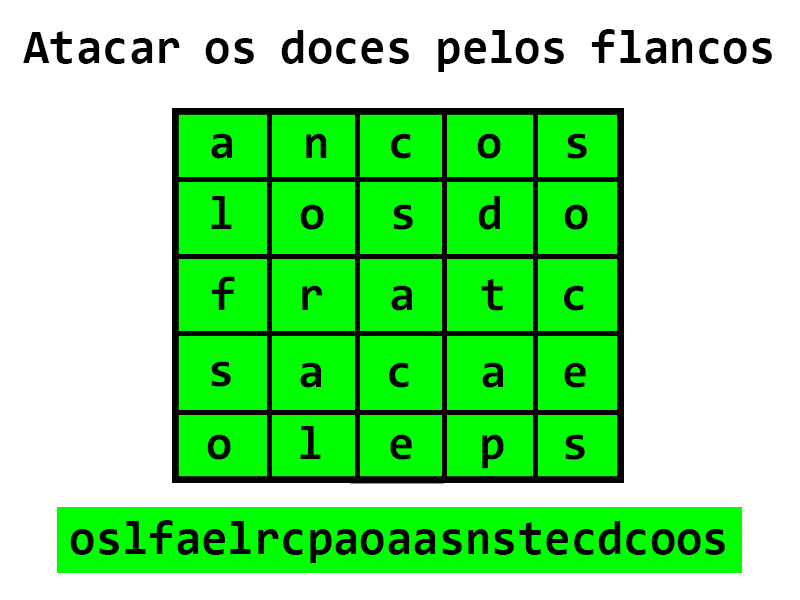
<style>
.page{position:relative;width:800px;height:600px;background:#ffffff}
.page>*{position:absolute;margin:0}
.t1{font:48px "Consolas-Bold";color:#000000}
.t2{font:48.1px "Consolas-Bold";color:#000000}
</style>
<div class="page">
<p class="t1" style="left:23px;top:29px;width:749px;height:43px">Atacar os doces pelos flancos</p>
<p class="t2" style="left:211px;top:133px;width:21px;height:26px">a</p>
<p class="t2" style="left:306px;top:133px;width:21px;height:25px">n</p>
<p class="t2" style="left:391px;top:133px;width:20px;height:26px">c</p>
<p class="t2" style="left:477px;top:133px;width:24px;height:26px">o</p>
<p class="t2" style="left:567px;top:133px;width:20px;height:26px">s</p>
<p class="t2" style="left:211px;top:196px;width:21px;height:33px">l</p>
<p class="t2" style="left:478px;top:196px;width:22px;height:34px">d</p>
<p class="t2" style="left:300px;top:204px;width:24px;height:26px">o</p>
<p class="t2" style="left:393px;top:204px;width:20px;height:26px">s</p>
<p class="t2" style="left:564px;top:204px;width:24px;height:26px">o</p>
<p class="t2" style="left:211px;top:276px;width:24px;height:34px">f</p>
<p class="t2" style="left:481px;top:278px;width:22px;height:33px">t</p>
<p class="t2" style="left:302px;top:285px;width:21px;height:25px">r</p>
<p class="t2" style="left:391px;top:285px;width:21px;height:26px">a</p>
<p class="t2" style="left:564px;top:285px;width:20px;height:26px">c</p>
<p class="t2" style="left:211px;top:361px;width:20px;height:26px">s</p>
<p class="t2" style="left:300px;top:362px;width:21px;height:26px">a</p>
<p class="t2" style="left:389px;top:362px;width:20px;height:26px">c</p>
<p class="t2" style="left:482px;top:362px;width:21px;height:26px">a</p>
<p class="t2" style="left:564px;top:362px;width:22px;height:26px">e</p>
<p class="t2" style="left:207px;top:434px;width:24px;height:26px">o</p>
<p class="t2" style="left:300px;top:426px;width:21px;height:33px">l</p>
<p class="t2" style="left:390px;top:434px;width:22px;height:26px">e</p>
<p class="t2" style="left:482px;top:434px;width:22px;height:35px">p</p>
<p class="t2" style="left:565px;top:434px;width:20px;height:26px">s</p>
<p class="t1" style="left:70px;top:520px;width:655px;height:43px">oslfaelrcpaoaasnstecdcoos</p>
</div>
